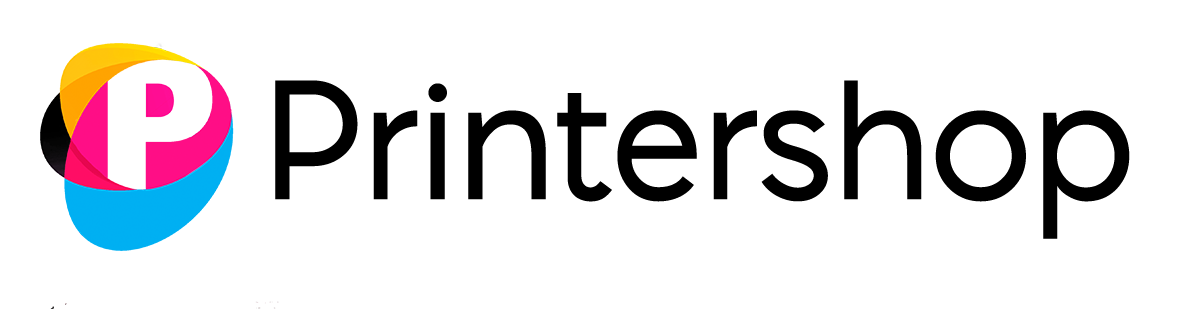
<style>
.page{position:relative;width:1181px;height:315px;background:#ffffff}
.page>*{position:absolute;margin:0}
.t1{font:158.1px "Pontiac-Regular";color:#000000}
</style>
<div class="page">
<p class="t1" style="left:275px;top:80px;width:855px;height:159px">Printershop</p>
</div>
